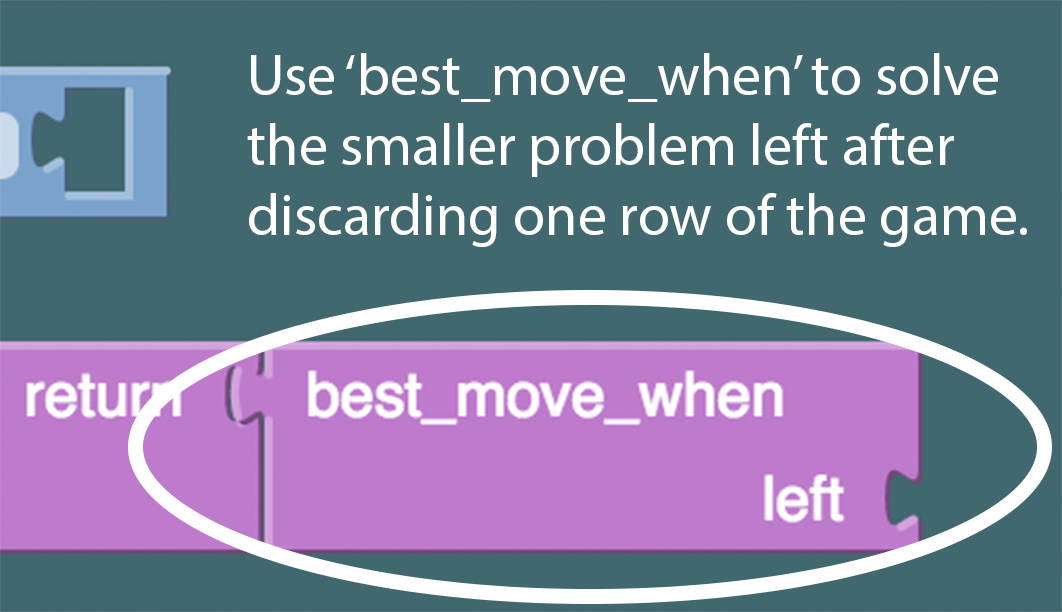
<style>
.page{position:relative;width:1062px;height:612px;background:#41686f}
.page>*{position:absolute;margin:0}
.t1{font:58.3px "MyriadPro-Regular";color:#ffffff}
</style>
<div class="page">
<p class="t1" style="left:247px;top:53px;width:780px;height:194px">Use ‘best_move_when’ to solve<br>the smaller problem left after<br>discarding one row of the game.</p>
</div>
